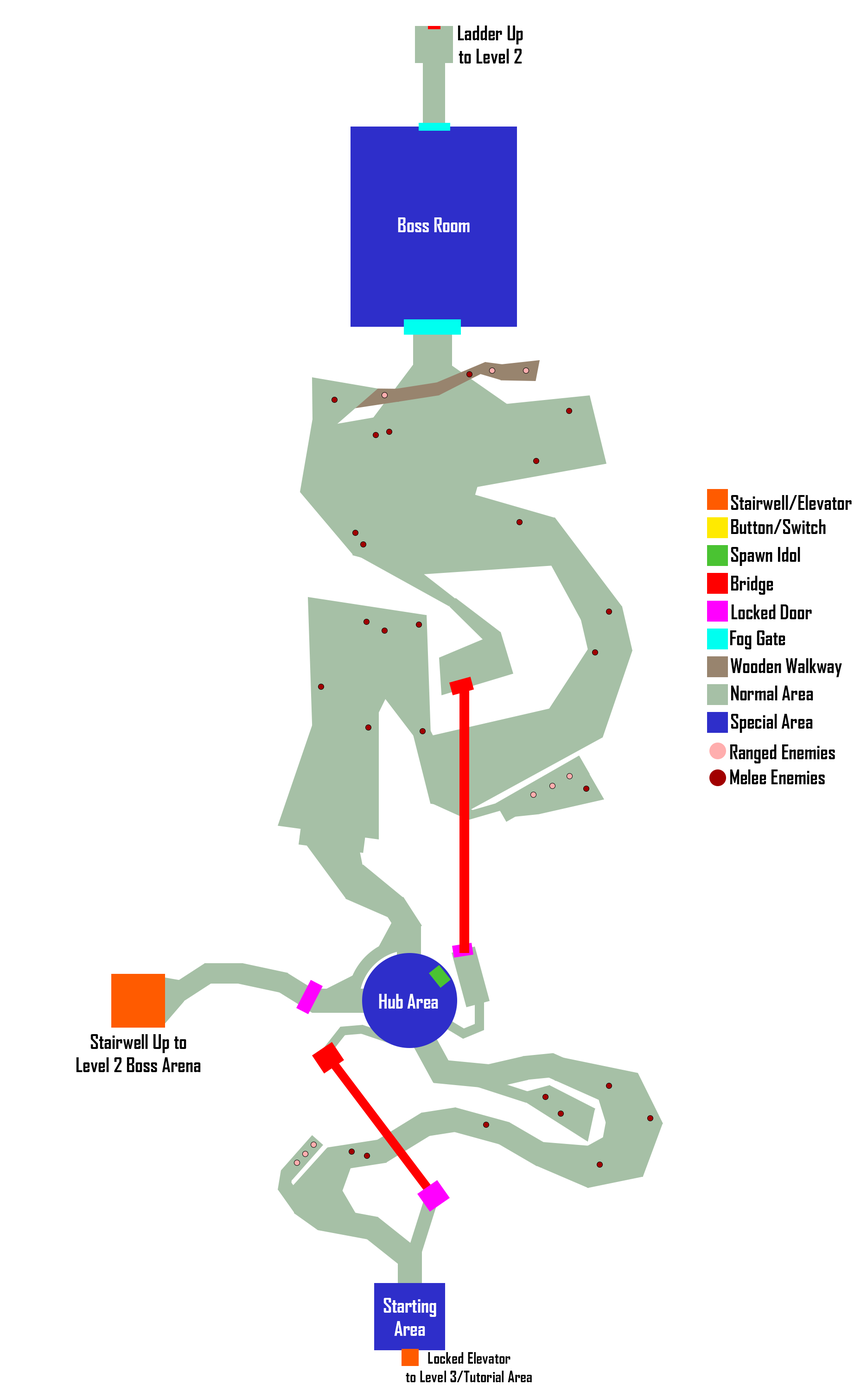
<style>
.page{position:relative;width:861px;height:1385px;background:#ffffff}
.page>*{position:absolute;margin:0}
.t1{font:19.3px "AgencyFB-Bold";color:#000000}
.t2{font:19.3px "AgencyFB-Bold";color:#ffffff}
.t3{font:15.4px "AgencyFB-Bold";color:#000000}
</style>
<div class="page">
<p class="t1" style="left:458px;top:25px;width:65px;height:39px;text-align:center">Ladder Up<br>to Level 2</p>
<p class="t2" style="left:398px;top:217px;width:72px;height:15px">Boss Room</p>
<p class="t1" style="left:731px;top:495px;width:121px;height:15px">Stairwell/Elevator</p>
<p class="t1" style="left:731px;top:519px;width:95px;height:15px">Button/Switch</p>
<p class="t1" style="left:731px;top:547px;width:69px;height:19px">Spawn Idol</p>
<p class="t1" style="left:731px;top:576px;width:42px;height:19px">Bridge</p>
<p class="t1" style="left:731px;top:605px;width:81px;height:14px">Locked Door</p>
<p class="t1" style="left:730px;top:630px;width:55px;height:19px">Fog Gate</p>
<p class="t1" style="left:730px;top:658px;width:112px;height:19px">Wooden Walkway</p>
<p class="t1" style="left:731px;top:686px;width:82px;height:14px">Normal Area</p>
<p class="t1" style="left:731px;top:714px;width:82px;height:19px">Special Area</p>
<p class="t1" style="left:730px;top:745px;width:105px;height:19px">Ranged Enemies</p>
<p class="t1" style="left:730px;top:770px;width:95px;height:14px">Melee Enemies</p>
<p class="t2" style="left:379px;top:994px;width:59px;height:15px">Hub Area</p>
<p class="t1" style="left:76px;top:1034px;width:125px;height:38px;text-align:center">Stairwell Up to<br>Level 2 Boss Arena</p>
<p class="t2" style="left:383px;top:1298px;width:53px;height:38px;text-align:center">Starting<br>Area</p>
<p class="t3" style="left:406px;top:1352px;width:126px;height:30px;text-align:center">Locked Elevator<br>to Level 3/Tutorial Area</p>
</div>
